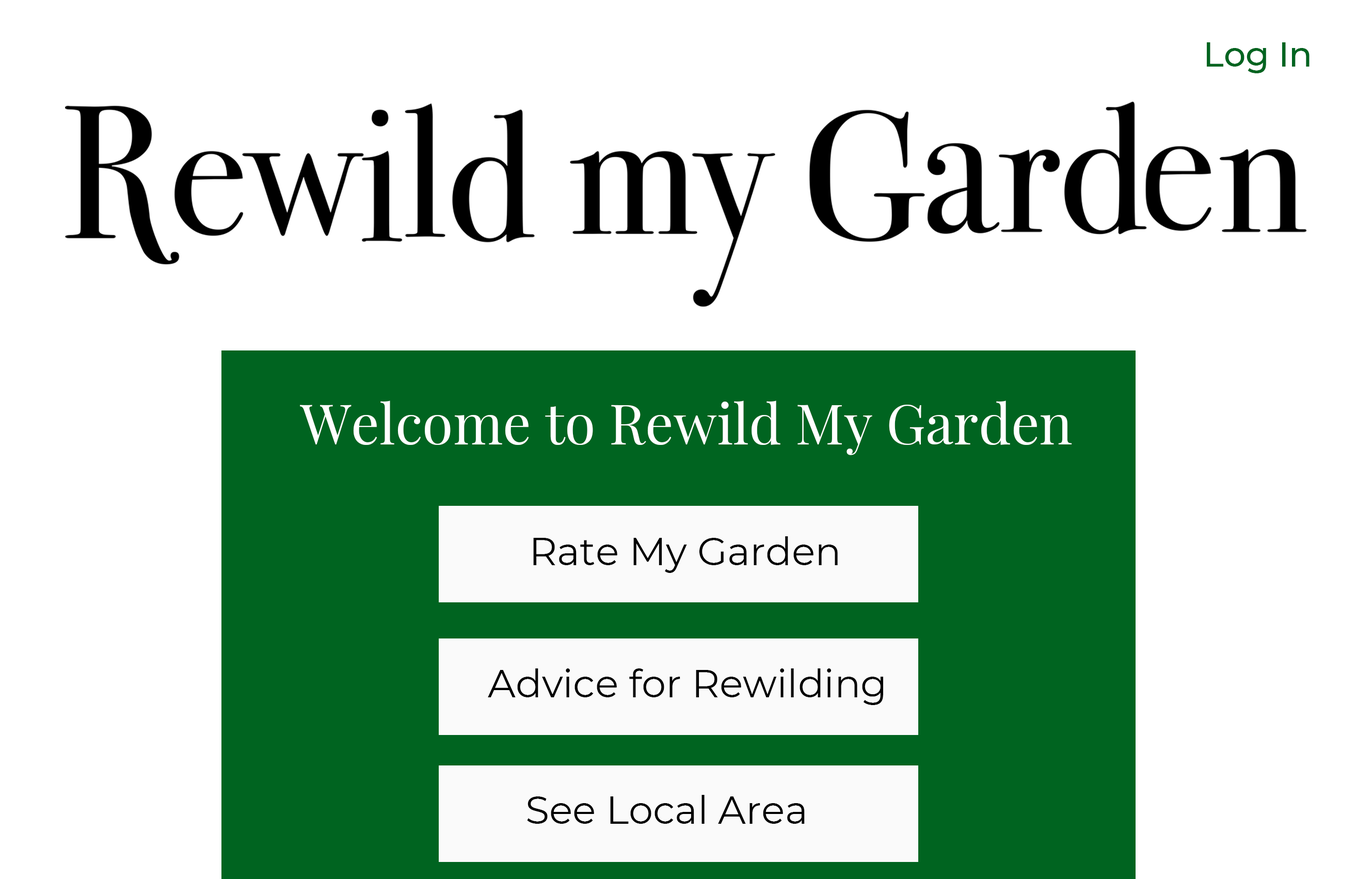
<style>
.page{position:relative;width:1357px;height:879px;background:#ffffff}
.page>*{position:absolute;margin:0}
.t1{font:34.4px "Montserrat-Medium";color:#006420}
.t2{font:55.9px "PlayfairDisplay-Regular";color:#ffffff}
.t3{font:38.7px "Montserrat-Regular";color:#000000}
</style>
<div class="page">
<p class="t1" style="left:1207px;top:42px;width:102px;height:31px">Log In</p>
<p class="t2" style="left:300px;top:400px;width:772px;height:55px">Welcome to Rewild My Garden</p>
<p class="t3" style="left:533px;top:536px;width:305px;height:37px">Rate My Garden</p>
<p class="t3" style="left:488px;top:668px;width:395px;height:37px">Advice for Rewilding</p>
<p class="t3" style="left:527px;top:795px;width:278px;height:29px">See Local Area</p>
</div>
